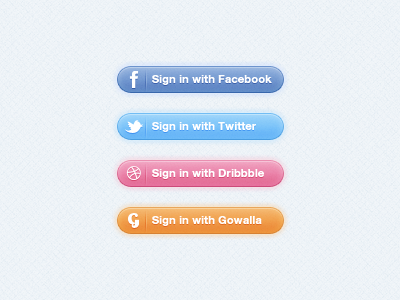
<style>
.page{position:relative;width:400px;height:300px}
.page>*{position:absolute;margin:0}
.t1{font:11px "HelveticaNeueLTCom-Bd";letter-spacing:-0.01em;color:#ffffff;font-weight:bold}
</style>
<div class="page">
<p class="t1" style="left:152px;top:75px;width:120px;height:10px">Sign in with Facebook</p>
<p class="t1" style="left:152px;top:122px;width:104px;height:10px">Sign in with Twitter</p>
<p class="t1" style="left:152px;top:169px;width:112px;height:10px">Sign in with Dribbble</p>
<p class="t1" style="left:152px;top:216px;width:110px;height:10px">Sign in with Gowalla</p>
</div>
